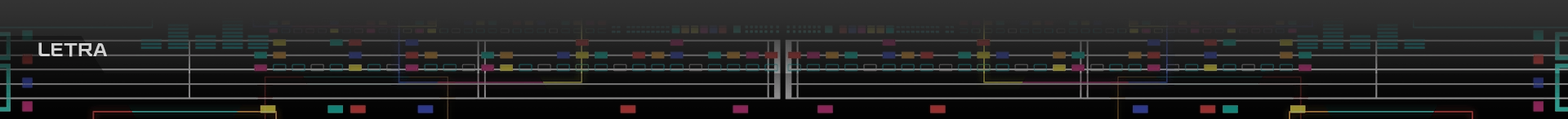
<style>
.page{position:relative;width:1568px;height:119px}
.page>*{position:absolute;margin:0}
.t1{font:15.2px "KafuTechnoStd-U";letter-spacing:0.05em;color:#d2d2d2}
</style>
<div class="page">
<p class="t1" style="left:38px;top:42px;width:69px;height:15px">LETRA</p>
</div>
